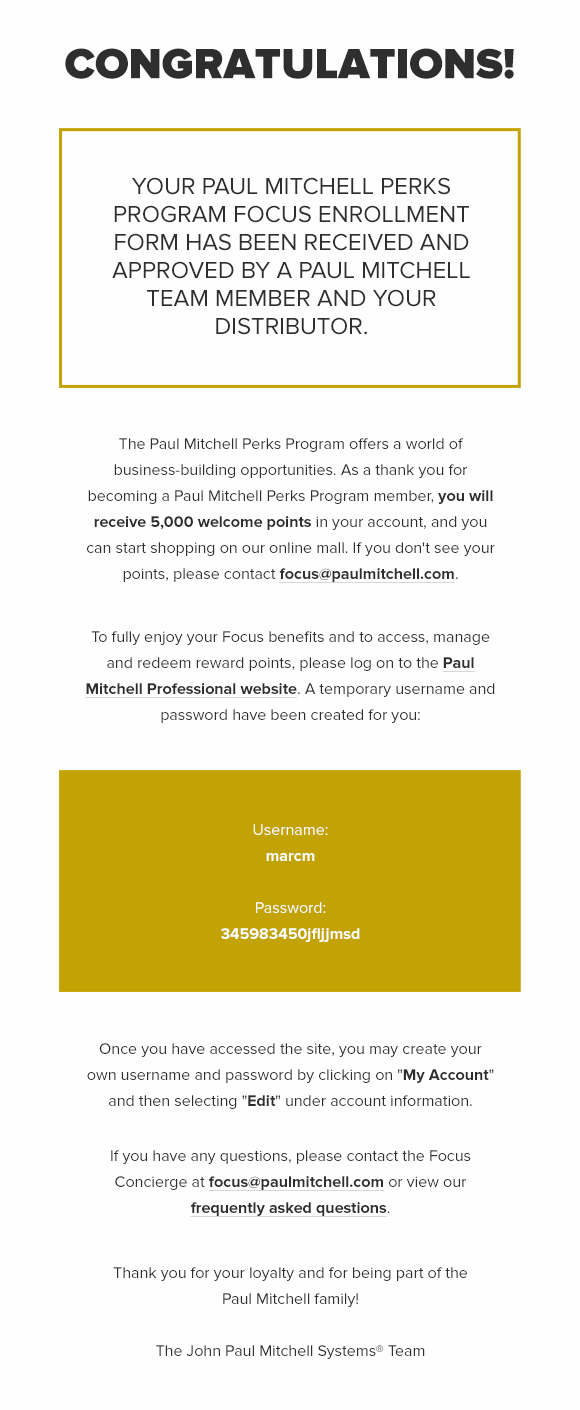
<style>
.page{position:relative;width:580px;height:1410px;background:#fffefe}
.page>*{position:absolute;margin:0}
.t1{font:44px "ProximaNova-Black";color:#2e2e2e;text-transform:uppercase}
.t2{font:24px/28px "ProximaNova-Regular";color:#2e2e2e;text-transform:uppercase}
.t3{font:16px/26px "ProximaNova-Regular";color:#2e2e2e}
.t4{font:16px/26px "ProximaNova-Bold";color:#2e2e2e}
.t5{font:16px/26px "ProximaNova-Bold";color:#2e2e2e;text-decoration:underline}
.t6{font:16px/26px "ProximaNova-Bold";color:#ffffff}
.t7{font:16px/26px "ProximaNova-Regular";color:#ffffff}
</style>
<div class="page">
<p class="t1" style="left:65px;top:48px;width:449px;height:31px">Congratulations!</p>
<p class="t2" style="left:112px;top:177px;width:358px;height:158px;text-align:center">Your Paul Mitchell Perks Program Focus enrollment form has been received and approved by a Paul Mitchell team member and your distributor.</p>
<p class="t3" style="left:87px;top:438px;width:408px;height:145px;text-align:center">The Paul Mitchell Perks Program offers a world of business-building opportunities. As a thank you for becoming a Paul Mitchell Perks Program member, <span class="t4">you will receive 5,000 welcome points </span>in your account, and you can start shopping on our online mall. If you don't see your points, please contact <span class="t5">focus@paulmitchell.com</span>.</p>
<p class="t3" style="left:85px;top:631px;width:410px;height:92px;text-align:center">To fully enjoy your Focus benefits and to access, manage and redeem reward points, please log on to the <span class="t5">Paul Mitchell Professional website</span>. A temporary username and password have been created for you:</p>
<p class="t6" style="left:221px;top:824px;width:139px;height:118px;text-align:center"><span class="t7">Username:<br></span>marcm<br><span class="t7"><br>Password:<br></span>345983450jfljjmsd</p>
<p class="t3" style="left:87px;top:1043px;width:407px;height:66px;text-align:center">Once you have accessed the site, you may create your own username and password by clicking on "<span class="t4">My Account</span>" and then selecting "<span class="t4">Edit</span>" under account information.</p>
<p class="t3" style="left:111px;top:1150px;width:360px;height:67px;text-align:center">If you have any questions, please contact the Focus Concierge at <span class="t5">focus@paulmitchell.com</span> or view our <span class="t5">frequently asked questions</span>.</p>
<p class="t3" style="left:113px;top:1267px;width:354px;height:92px;text-align:center">Thank you for your loyalty and for being part of the Paul Mitchell family!<br><br>The John Paul Mitchell Systems® Team</p>
</div>
